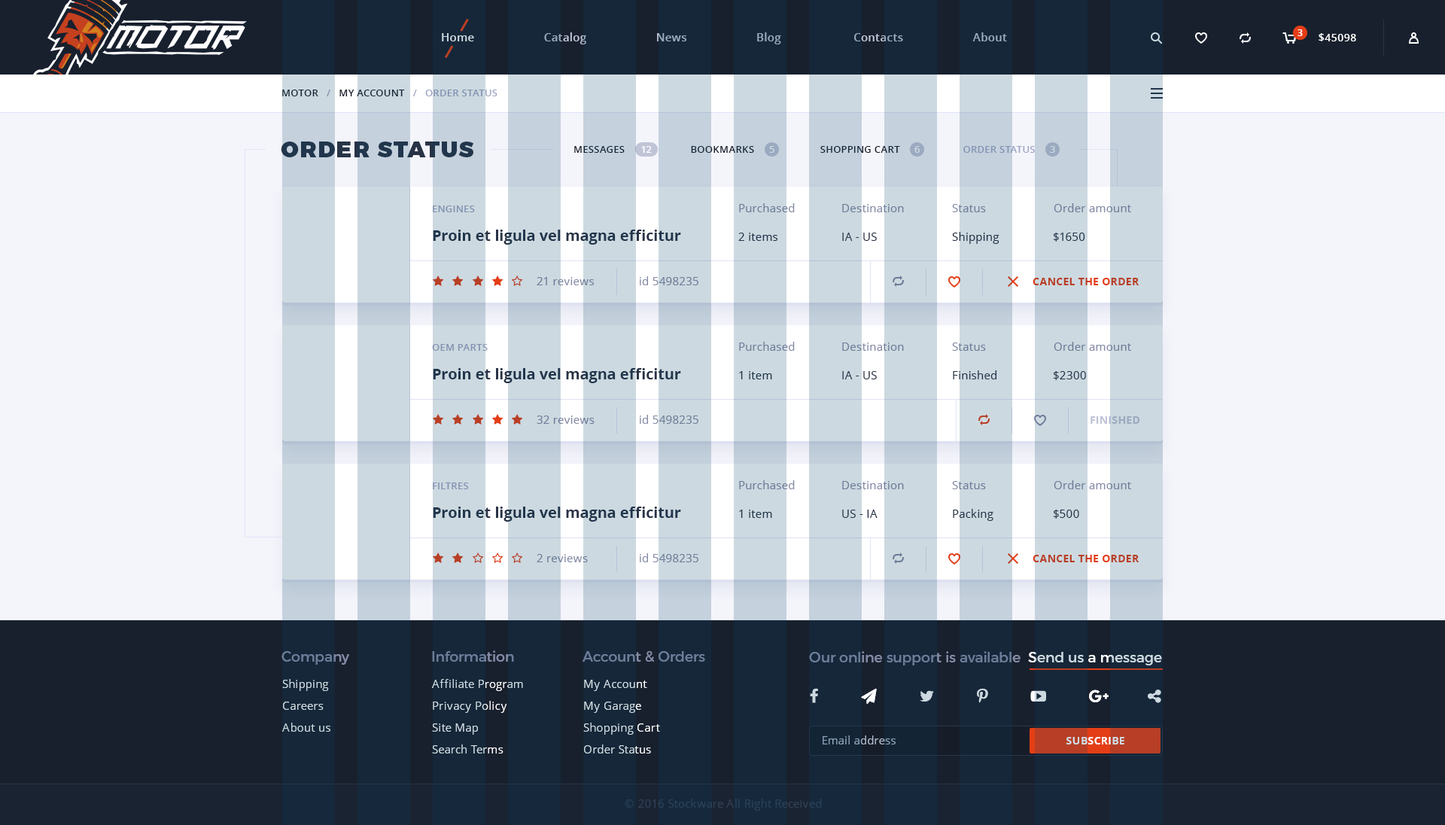
<style>
.page{position:relative;width:1445px;height:825px;background:#f4f5fb}
.page>*{position:absolute;margin:0}
.t1{font:9px "OpenSans-Bold";color:#ffffff}
.t2{font:11.3px "OpenSans-Semibold";letter-spacing:0.02em}
.t3{font:10.5px "OpenSans-Semibold";letter-spacing:0.02em;color:#ffffff;text-transform:uppercase}
.t4{font:9.8px "OpenSans-Semibold";letter-spacing:0.02em;text-transform:uppercase}
.t5{font:22.6px "Montserrat-Black";letter-spacing:0.06em;color:#283346;text-transform:uppercase}
.t6{font:9.8px "OpenSans-Semibold";letter-spacing:0.02em;color:#18202e;text-transform:uppercase}
.t7{font:9.8px "OpenSans-Semibold";letter-spacing:0.02em;color:#a0a6c5;text-transform:uppercase}
.t8{font:9.8px "OpenSans-Semibold";letter-spacing:0.02em;color:#ffffff;text-transform:uppercase}
.t9{font:9.8px "OpenSans-Semibold";letter-spacing:0.02em;color:#cdd9e0;text-transform:uppercase}
.t10{font:9.8px "OpenSans-Semibold";letter-spacing:0.02em;color:#8192b1;text-transform:uppercase}
.t11{font:11.3px "OpenSans";letter-spacing:0.02em;color:#6d7d99}
.t12{font:11.3px "OpenSans";letter-spacing:0.02em}
.t13{font:15.1px "OpenSans-Bold";color:#283346}
.t14{font:11.3px "OpenSans";letter-spacing:0.02em;color:#283346}
.t15{font:10.5px "OpenSans-Bold";letter-spacing:0.02em;color:#b83f25;text-transform:uppercase}
.t16{font:10.5px "OpenSans-Bold";letter-spacing:0.02em;text-transform:uppercase}
.t17{font:14.3px "Montserrat-Regular";color:#6d7d99}
.t18{font:14.3px "Montserrat-Regular"}
.t19{font:11.3px/21.8px "OpenSans";letter-spacing:0.02em;color:#cdd9e0}
.t20{font:10.5px "OpenSans-Bold";letter-spacing:0.02em}
.t21{font:11.3px "OpenSans";letter-spacing:0.02em;color:#324057}
</style>
<div class="page">
<p class="t1" style="left:1298px;top:29px;width:5px;height:7px">3</p>
<p class="t2" style="left:442px;top:32px;width:565px;height:12px">Home                      Catalog                      News                      Blog                       Contacts                      About</p>
<p class="t3" style="left:1319px;top:33px;width:37px;height:8px">$45098</p>
<p class="t4" style="left:282px;top:90px;width:216px;height:6px">Motor   /   My Account   /   Order Status</p>
<p class="t5" style="left:281px;top:142px;width:193px;height:15px">ORDER STATUS</p>
<p class="t6" style="left:574px;top:146px;width:461px;height:7px">Messages                        Bookmarks                        Shopping Cart                      <span class="t7"> Order Status</span></p>
<p class="t8" style="left:641px;top:146px;width:11px;height:7px">12</p>
<p class="t9" style="left:769px;top:146px;width:6px;height:7px">5</p>
<p class="t9" style="left:915px;top:146px;width:5px;height:7px">6</p>
<p class="t9" style="left:1050px;top:146px;width:5px;height:7px">3</p>
<p class="t10" style="left:433px;top:206px;width:42px;height:6px">Engines</p>
<p class="t11" style="left:739px;top:203px;width:56px;height:9px">Purchased</p>
<p class="t12" style="left:842px;top:204px;width:62px;height:8px">Destination</p>
<p class="t11" style="left:952px;top:204px;width:34px;height:8px">Status</p>
<p class="t12" style="left:1054px;top:203px;width:77px;height:9px">Order amount</p>
<p class="t13" style="left:433px;top:230px;width:248px;height:15px">Proin et ligula vel magna efficitur</p>
<p class="t14" style="left:738px;top:233px;width:40px;height:8px">2 items</p>
<p class="t14" style="left:842px;top:233px;width:35px;height:8px">IA - US</p>
<p class="t14" style="left:952px;top:232px;width:48px;height:12px">Shipping</p>
<p class="t14" style="left:1053px;top:233px;width:32px;height:9px">$1650</p>
<p class="t12" style="left:537px;top:277px;width:58px;height:8px">21 reviews</p>
<p class="t12" style="left:640px;top:276px;width:59px;height:9px">id 5498235</p>
<p class="t15" style="left:1033px;top:278px;width:107px;height:7px">Cancel the order</p>
<p class="t11" style="left:739px;top:342px;width:56px;height:9px">Purchased</p>
<p class="t12" style="left:1054px;top:342px;width:77px;height:9px">Order amount</p>
<p class="t10" style="left:432px;top:344px;width:56px;height:7px">OEM Parts</p>
<p class="t12" style="left:842px;top:343px;width:62px;height:8px">Destination</p>
<p class="t11" style="left:952px;top:343px;width:34px;height:8px">Status</p>
<p class="t13" style="left:433px;top:368px;width:248px;height:15px">Proin et ligula vel magna efficitur</p>
<p class="t14" style="left:739px;top:371px;width:33px;height:8px">1 item</p>
<p class="t14" style="left:842px;top:371px;width:35px;height:8px">IA - US</p>
<p class="t14" style="left:953px;top:370px;width:44px;height:9px">Finished</p>
<p class="t14" style="left:1053px;top:371px;width:33px;height:9px">$2300</p>
<p class="t12" style="left:537px;top:416px;width:58px;height:8px">32 reviews</p>
<p class="t12" style="left:640px;top:415px;width:59px;height:9px">id 5498235</p>
<p class="t16" style="left:1091px;top:416px;width:49px;height:8px">Finished</p>
<p class="t10" style="left:433px;top:483px;width:36px;height:6px">Filtres</p>
<p class="t11" style="left:739px;top:480px;width:56px;height:9px">Purchased</p>
<p class="t12" style="left:842px;top:481px;width:62px;height:8px">Destination</p>
<p class="t11" style="left:952px;top:481px;width:34px;height:8px">Status</p>
<p class="t12" style="left:1054px;top:480px;width:77px;height:9px">Order amount</p>
<p class="t13" style="left:433px;top:507px;width:248px;height:15px">Proin et ligula vel magna efficitur</p>
<p class="t14" style="left:739px;top:510px;width:33px;height:8px">1 item</p>
<p class="t14" style="left:842px;top:510px;width:36px;height:8px">US - IA</p>
<p class="t14" style="left:953px;top:509px;width:41px;height:12px">Packing</p>
<p class="t14" style="left:1053px;top:510px;width:26px;height:9px">$500</p>
<p class="t12" style="left:537px;top:554px;width:51px;height:8px">2 reviews</p>
<p class="t12" style="left:640px;top:553px;width:59px;height:9px">id 5498235</p>
<p class="t15" style="left:1033px;top:555px;width:107px;height:7px">Cancel the order</p>
<p class="t17" style="left:282px;top:651px;width:67px;height:14px">Company</p>
<p class="t17" style="left:432px;top:650px;width:82px;height:12px">Information</p>
<p class="t17" style="left:583px;top:651px;width:122px;height:11px">Account &amp; Orders</p>
<p class="t18" style="left:809px;top:651px;width:353px;height:14px">Our online support is available  Send us a message</p>
<p class="t19" style="left:282px;top:679px;width:48px;height:53px">Shipping<br>Careers<br>About us</p>
<p class="t19" style="left:432px;top:679px;width:91px;height:75px">Affiliate Program<br>Privacy Policy<br>Site Map<br>Search Terms</p>
<p class="t19" style="left:583px;top:680px;width:77px;height:74px">My Account<br>My Garage<br>Shopping Cart<br>Order Status</p>
<p class="t12" style="left:823px;top:735px;width:73px;height:9px">Email address</p>
<p class="t20" style="left:1067px;top:737px;width:58px;height:7px">SUBSCRIBE</p>
<p class="t21" style="left:625px;top:799px;width:197px;height:12px">© 2016 Stockware All Right Received</p>
</div>
